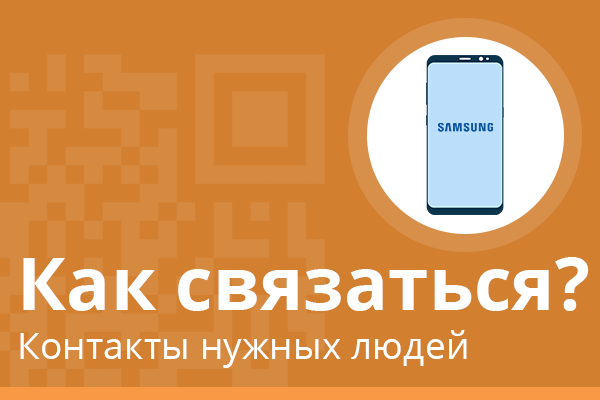
<style>
.page{position:relative;width:600px;height:400px;background:#d28030}
.page>*{position:absolute;margin:0}
.t1{font:73.3px "OpenSans-Bold"}
.t2{font:73.3px "OpenSans-Bold";color:#ffffff}
.t3{font:37.3px "OpenSans";color:#ffffff}
</style>
<div class="page">
<p class="t1" style="left:23px;top:253px;width:472px;height:75px">Как пройти?</p>
<p class="t1" style="left:23px;top:257px;width:224px;height:67px">Где я?</p>
<p class="t2" style="left:23px;top:257px;width:566px;height:54px">Как связаться?</p>
<p class="t3" style="left:20px;top:330px;width:447px;height:38px">Контакты нужных людей</p>
</div>
